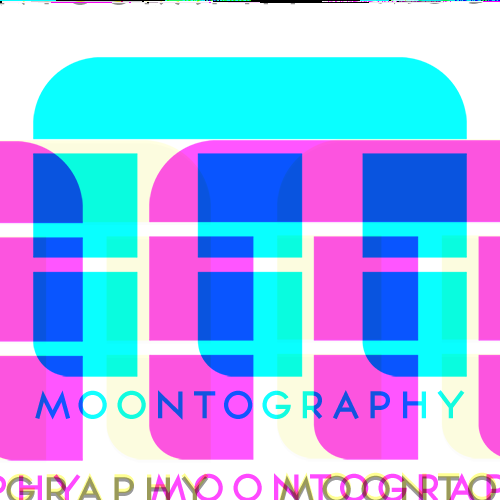
<style>
.page{position:relative;width:500px;height:500px;background:#ffffff}
.page>*{position:absolute;margin:0}
.t1{font:34.7px "TYPOGRAPHPRO-SemiBold";letter-spacing:0.2em}
</style>
<div class="page">
<p class="t1" style="left:35px;top:389px;width:430px;height:30px">MOONTOGRAPHY</p>
</div>
